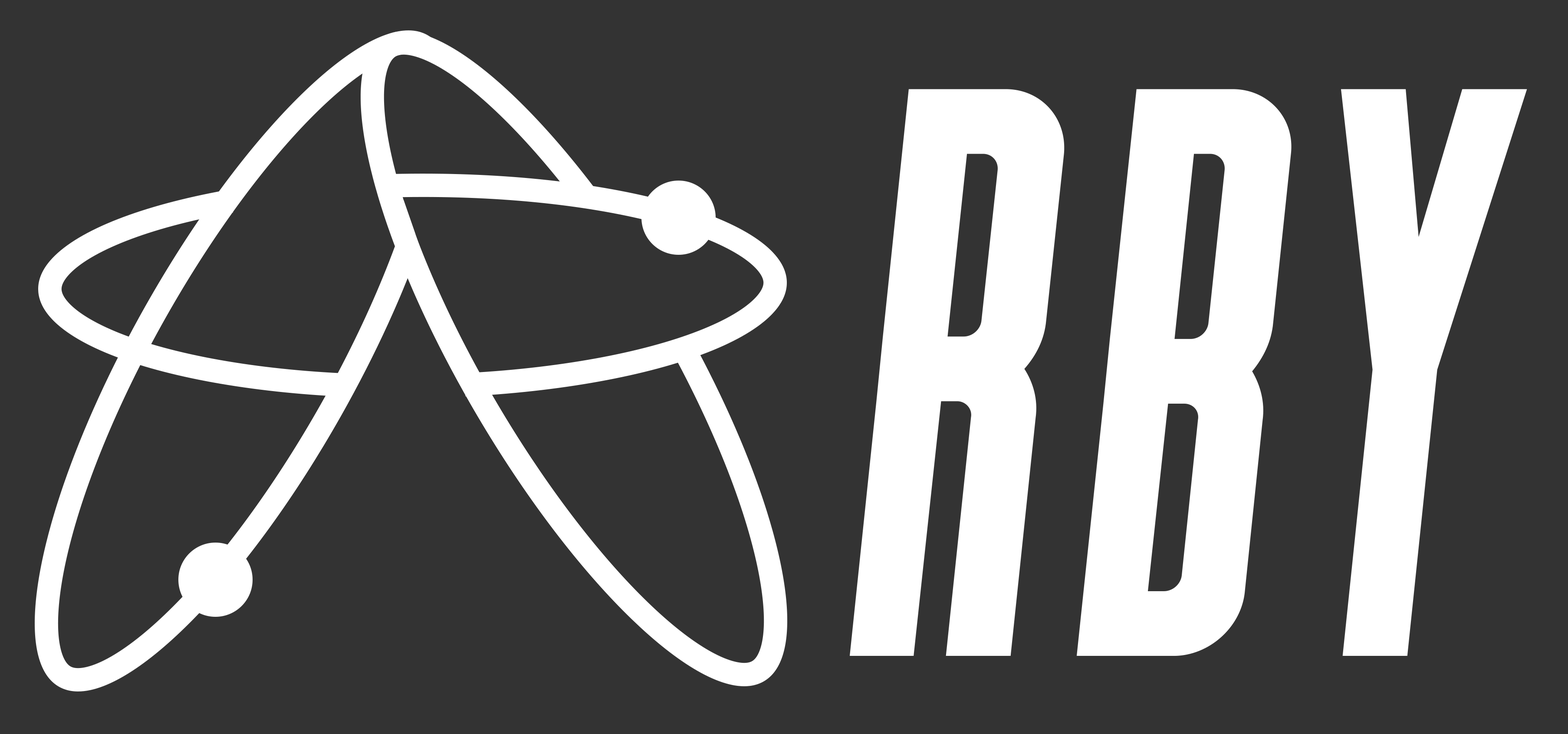
<style>
.page{position:relative;width:1568px;height:734px;background:#333333}
.page>*{position:absolute;margin:0}
.t1{font:808.3px "ForeverFreedomItalic-Regular";letter-spacing:0.06em;color:#ffffff}
</style>
<div class="page">
<p class="t1" style="left:850px;top:89px;width:677px;height:567px">RBY</p>
</div>
